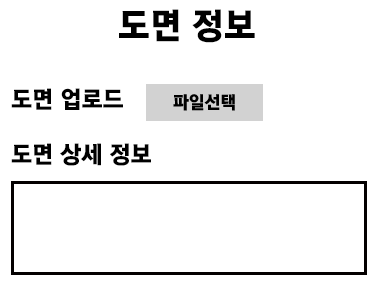
<style>
.page{position:relative;width:381px;height:288px;background:#ffffff}
.page>*{position:absolute;margin:0}
.t1{font:36px "KoreanGD19-R";color:#000000}
.t2{font:24px "KoreanGD19-R";color:#000000}
</style>
<div class="page">
<p class="t1" style="left:119px;top:9px;width:136px;height:34px">도면 정보</p>
<p class="t2" style="left:11px;top:88px;width:112px;height:22px">도면 업로드</p>
<p class="t2" style="left:11px;top:143px;width:140px;height:23px">도면 상세 정보</p>
</div>
